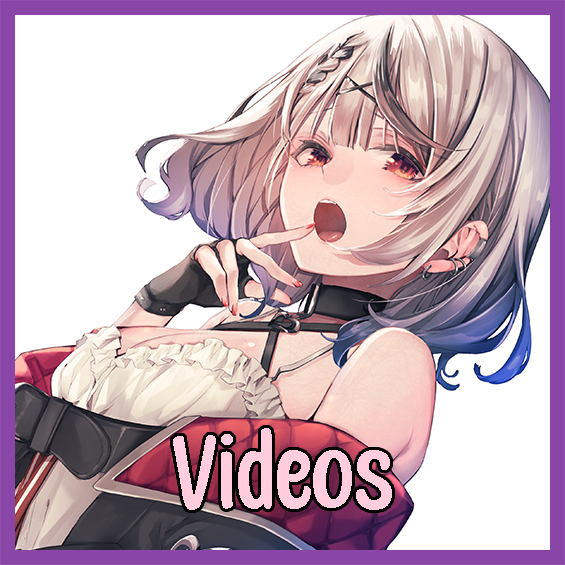
<style>
.page{position:relative;width:565px;height:565px;background:#ffffff}
.page>*{position:absolute;margin:0}
.t1{font:115.7px "HoneyNotes-Regular";color:#ffcddd}
</style>
<div class="page">
<p class="t1" style="left:173px;top:428px;width:219px;height:82px">Videos</p>
</div>
